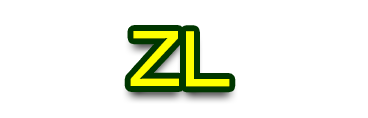
<style>
.page{position:relative;width:368px;height:118px;background:#ffffff}
.page>*{position:absolute;margin:0}
.t1{font:69.3px "NewRodinPro-DB";letter-spacing:-0.022em;color:#feff00}
</style>
<div class="page">
<p class="t1" style="left:130px;top:31px;width:100px;height:56px">ZL</p>
</div>
